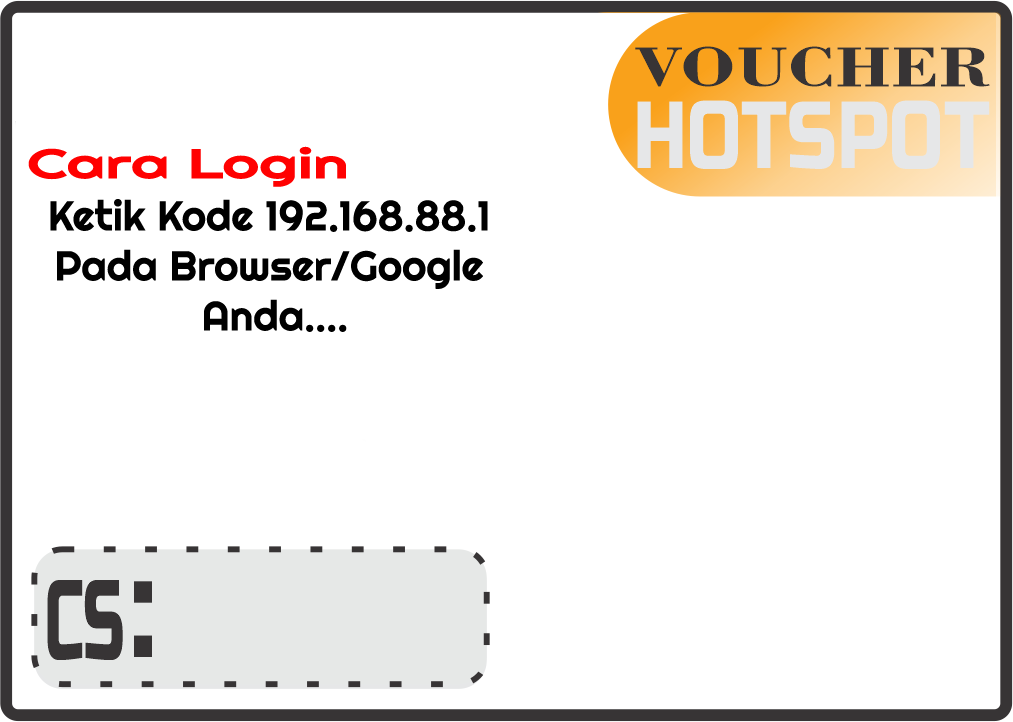
<style>
.page{position:relative;width:1013px;height:722px;background:#ffffff}
.page>*{position:absolute;margin:0}
.t1{font:41.7px "Righteous-Regular";color:#ff0101;scale:1.53 1}
.t2{font:41.7px "Righteous-Regular";color:#000000}
</style>
<div class="page">
<p class="t1" style="left:28px;top:146px;width:318px;height:41px">Cara Login</p>
<p class="t2" style="left:50px;top:199px;width:438px;height:133px;text-align:center">Ketik Kode 192.168.88.1<br>Pada Browser/Google<br> Anda....</p>
</div>
